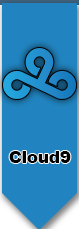
<style>
.page{position:relative;width:79px;height:229px;background:#2184c0}
.page>*{position:absolute;margin:0}
.t1{font:16.7px "Arial-Black";letter-spacing:-0.01em;color:#000000}
</style>
<div class="page">
<p class="t1" style="left:9px;top:151px;width:62px;height:12px">Cloud9</p>
</div>
